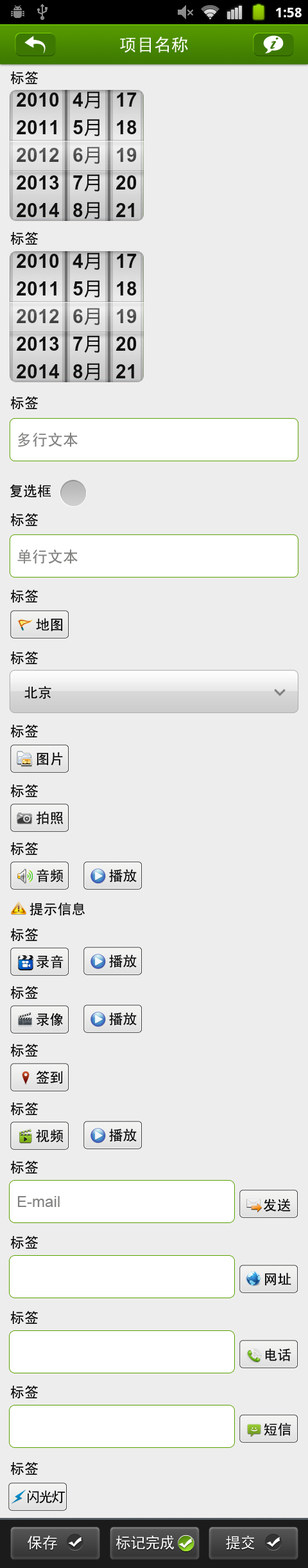
<style>
.page{position:relative;width:308px;height:1568px;background:#eeeded}
.page>*{position:absolute;margin:0}
.t1{font:17.3px "SimHei";color:#ffffff}
.t2{font:19.3px "MonotypeCorsiva";color:#3d7902;font-weight:bold}
.t3{font:14.1px "SimHei";color:#000000}
.t4{font:15.4px "SimHei";color:#81817f}
.t5{font:15.4px "ArialMT";color:#81817f}
.t6{font:14.1px "SimHei";letter-spacing:-0.1em;color:#000000}
.t7{font:15.4px "SimHei";color:#ffffff;text-transform:uppercase}
</style>
<div class="page">
<p class="t1" style="left:120px;top:37px;width:68px;height:16px">项目名称</p>
<p class="t2" style="left:270px;top:37px;width:9px;height:12px;rotate:16deg">i</p>
<p class="t3" style="left:10px;top:71px;width:28px;height:14px">标签</p>
<p class="t3" style="left:10px;top:232px;width:28px;height:13px">标签</p>
<p class="t3" style="left:10px;top:396px;width:28px;height:14px">标签</p>
<p class="t4" style="left:18px;top:432px;width:60px;height:15px">多行文本</p>
<p class="t3" style="left:10px;top:484px;width:41px;height:14px">复选框</p>
<p class="t3" style="left:10px;top:513px;width:28px;height:14px">标签</p>
<p class="t4" style="left:17px;top:549px;width:61px;height:15px">单行文本</p>
<p class="t3" style="left:10px;top:590px;width:28px;height:13px">标签</p>
<p class="t3" style="left:36px;top:618px;width:27px;height:13px">地图</p>
<p class="t3" style="left:10px;top:651px;width:28px;height:14px">标签</p>
<p class="t3" style="left:24px;top:686px;width:27px;height:13px">北京</p>
<p class="t3" style="left:10px;top:725px;width:28px;height:13px">标签</p>
<p class="t3" style="left:37px;top:752px;width:26px;height:14px">图片</p>
<p class="t3" style="left:10px;top:784px;width:28px;height:14px">标签</p>
<p class="t3" style="left:36px;top:811px;width:28px;height:14px">拍照</p>
<p class="t3" style="left:10px;top:842px;width:28px;height:14px">标签</p>
<p class="t3" style="left:37px;top:869px;width:27px;height:14px">音频</p>
<p class="t3" style="left:109px;top:869px;width:28px;height:14px">播放</p>
<p class="t3" style="left:30px;top:903px;width:55px;height:13px">提示信息</p>
<p class="t3" style="left:10px;top:928px;width:28px;height:14px">标签</p>
<p class="t3" style="left:36px;top:955px;width:28px;height:14px">录音</p>
<p class="t3" style="left:109px;top:955px;width:28px;height:13px">播放</p>
<p class="t3" style="left:10px;top:986px;width:28px;height:14px">标签</p>
<p class="t3" style="left:36px;top:1013px;width:27px;height:13px">录像</p>
<p class="t3" style="left:109px;top:1012px;width:28px;height:14px">播放</p>
<p class="t3" style="left:10px;top:1044px;width:28px;height:13px">标签</p>
<p class="t3" style="left:36px;top:1071px;width:27px;height:13px">签到</p>
<p class="t3" style="left:10px;top:1102px;width:28px;height:14px">标签</p>
<p class="t3" style="left:36px;top:1129px;width:28px;height:14px">视频</p>
<p class="t3" style="left:109px;top:1129px;width:28px;height:13px">播放</p>
<p class="t3" style="left:10px;top:1161px;width:28px;height:13px">标签</p>
<p class="t5" style="left:17px;top:1196px;width:43px;height:11px">E-mail</p>
<p class="t3" style="left:264px;top:1199px;width:27px;height:12px">发送</p>
<p class="t3" style="left:10px;top:1236px;width:28px;height:13px">标签</p>
<p class="t3" style="left:265px;top:1273px;width:27px;height:13px">网址</p>
<p class="t3" style="left:10px;top:1311px;width:28px;height:14px">标签</p>
<p class="t3" style="left:265px;top:1348px;width:27px;height:14px">电话</p>
<p class="t3" style="left:10px;top:1386px;width:28px;height:13px">标签</p>
<p class="t3" style="left:264px;top:1423px;width:28px;height:13px">短信</p>
<p class="t3" style="left:10px;top:1462px;width:28px;height:14px">标签</p>
<p class="t6" style="left:28px;top:1490px;width:38px;height:13px">闪光灯</p>
<p class="t7" style="left:27px;top:1535px;width:30px;height:15px">保存</p>
<p class="t7" style="left:116px;top:1535px;width:59px;height:15px">标记完成</p>
<p class="t7" style="left:226px;top:1535px;width:29px;height:15px">提交</p>
</div>
